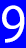
<style>
.page{position:relative;width:26px;height:48px;background:#0000ff}
.page>*{position:absolute;margin:0}
.t1{font:47.6px "KozGoPr6N-Regular";color:#ffffff}
</style>
<div class="page">
<p class="t1" style="left:2px;top:5px;width:23px;height:38px">9</p>
</div>
